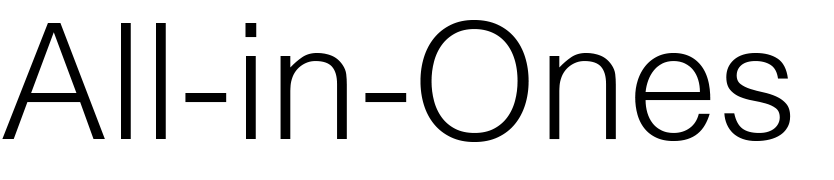
<style>
.page{position:relative;width:834px;height:180px;background:#ffffff}
.page>*{position:absolute;margin:0}
.t1{font:161.3px "Helvetica-Light";color:#000000}
</style>
<div class="page">
<p class="t1" style="left:2px;top:20px;width:789px;height:122px">All-in-Ones</p>
</div>
